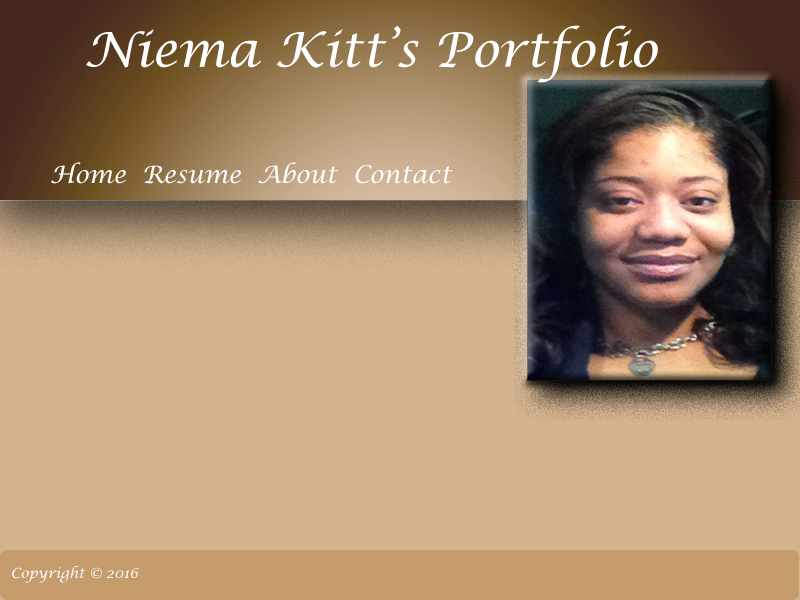
<style>
.page{position:relative;width:800px;height:600px;background:#d4b490}
.page>*{position:absolute;margin:0}
.t1{font:48px "LucidaCalligraphy-Italic";color:#ffffff}
.t2{font:24px "LucidaCalligraphy-Italic";color:#ffffff}
.t3{font:14px "LucidaCalligraphy-Italic";color:#ffffff}
</style>
<div class="page">
<p class="t1" style="left:86px;top:25px;width:572px;height:58px">Niema Kitt’s Portfolio</p>
<p class="t2" style="left:51px;top:162px;width:402px;height:22px">Home  Resume  About  Contact</p>
<p class="t3" style="left:12px;top:566px;width:127px;height:17px">Copyright © 2016</p>
</div>
